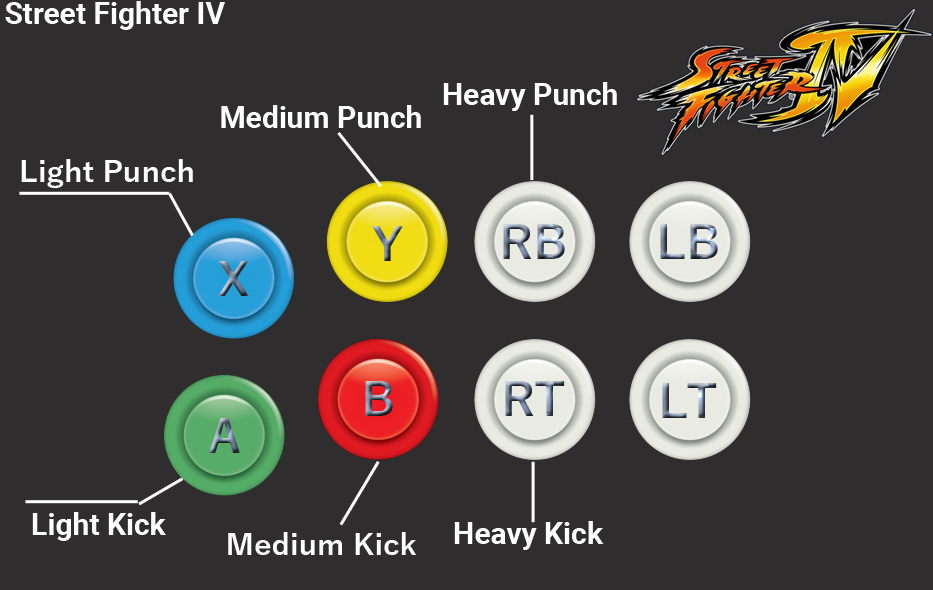
<style>
.page{position:relative;width:933px;height:590px;background:#2f2d2e}
.page>*{position:absolute;margin:0}
.t1{font:30px "Roboto-Bold";color:#ffffff}
.t2{font:30px "YuGothic-Bold";color:#ffffff}
</style>
<div class="page">
<p class="t1" style="left:5px;top:1px;width:220px;height:29px">Street Fighter IV</p>
<p class="t1" style="left:443px;top:82px;width:174px;height:29px">Heavy Punch</p>
<p class="t1" style="left:221px;top:105px;width:200px;height:23px">Medium Punch</p>
<p class="t2" style="left:21px;top:159px;width:172px;height:29px">Light Punch</p>
<p class="t1" style="left:32px;top:512px;width:134px;height:29px">Light Kick</p>
<p class="t1" style="left:454px;top:521px;width:150px;height:29px">Heavy Kick</p>
<p class="t2" style="left:228px;top:532px;width:188px;height:23px">Medium Kick</p>
</div>
